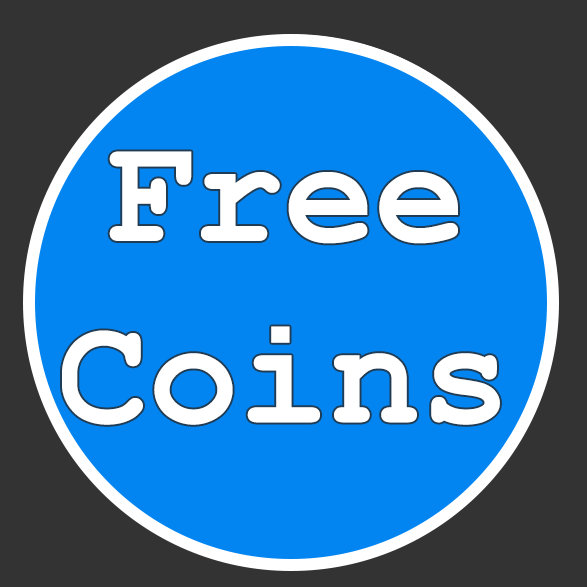
<style>
.page{position:relative;width:587px;height:587px;background:#0285f1}
.page>*{position:absolute;margin:0}
.t1{font:151.1px "CourierNewPS-BoldMT";color:#ffffff}
</style>
<div class="page">
<p class="t1" style="left:62px;top:151px;width:438px;height:274px;text-align:center">Free<br>Coins</p>
</div>
